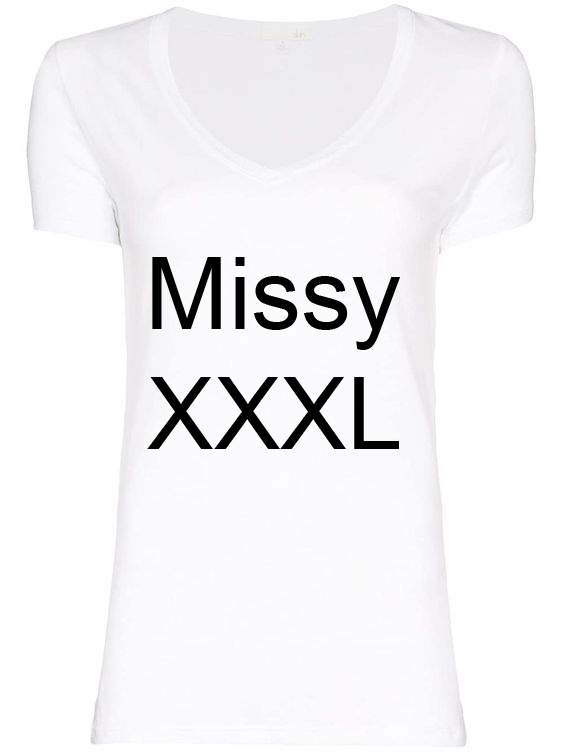
<style>
.page{position:relative;width:564px;height:752px;background:#ffffff}
.page>*{position:absolute;margin:0}
.t1{font:100px "ArialMT";color:#000000}
</style>
<div class="page">
<p class="t1" style="left:147px;top:257px;width:253px;height:192px;text-align:center">Missy<br>XXXL</p>
</div>
